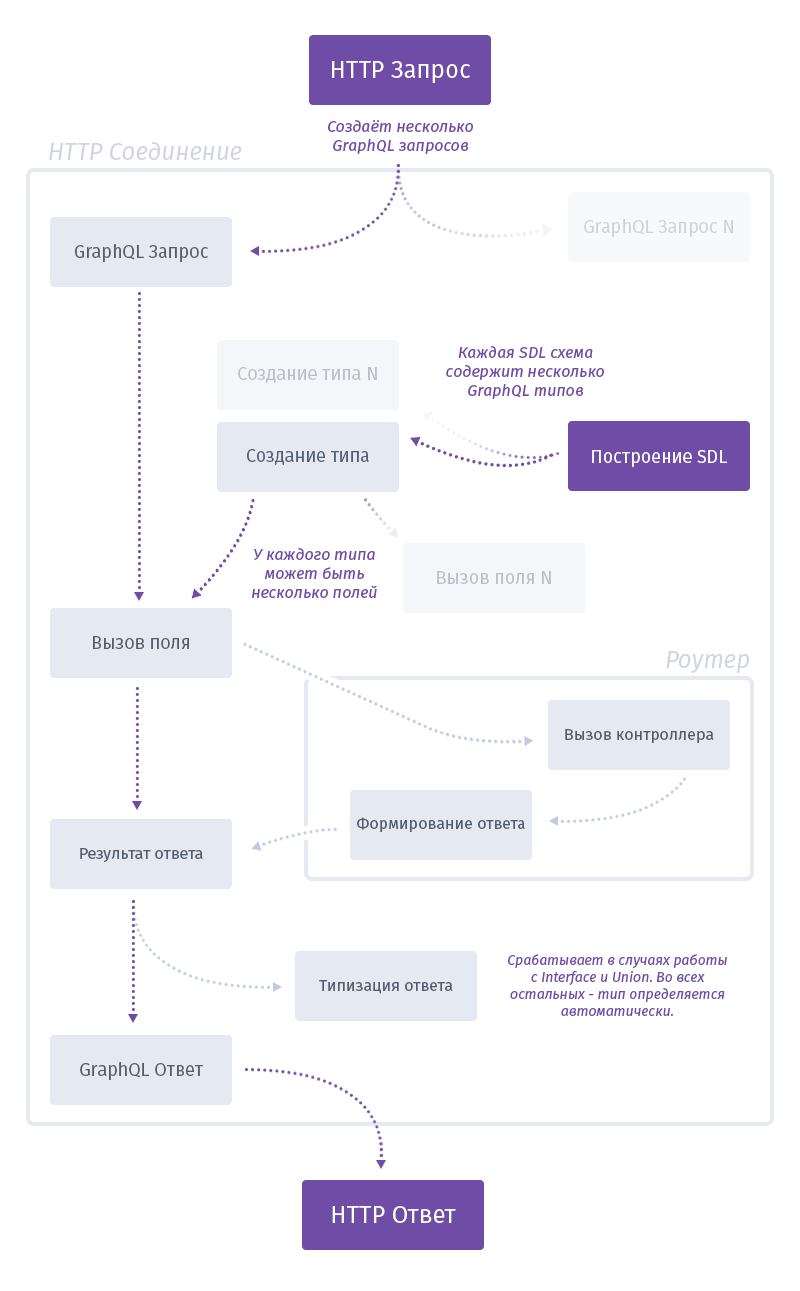
<style>
.page{position:relative;width:800px;height:1291px;background:#ffffff}
.page>*{position:absolute;margin:0}
.t1{font:24px "FiraSans-Regular";color:#ffffff}
.t2{font:16px "FiraSans-Italic";color:#6f4ca5}
.t3{font:24px "FiraSans-Italic";color:#ced4e2}
.t4{font:18px "FiraSans-Regular";color:#ced2d7}
.t5{font:18px "FiraSans-Regular";color:#505e70}
.t6{font:18px "FiraSans-Regular";color:#b9bfc6}
.t7{font:18px "FiraSans-Regular";color:#ffffff}
.t8{font:16px "FiraSans-Regular";color:#505e70}
.t9{font:14px "FiraSans-Italic";color:#6f4ca5}
</style>
<div class="page">
<p class="t1" style="left:332px;top:61px;width:138px;height:22px">HTTP Запрос</p>
<p class="t2" style="left:328px;top:120px;width:145px;height:34px;text-align:center">Создаёт несколько<br>GraphQL запросов</p>
<p class="t3" style="left:49px;top:142px;width:193px;height:18px">HTTP Соединение</p>
<p class="t4" style="left:584px;top:219px;width:149px;height:18px">GraphQL Запрос N</p>
<p class="t5" style="left:75px;top:244px;width:133px;height:18px">GraphQL Запрос</p>
<p class="t2" style="left:446px;top:346px;width:158px;height:53px;text-align:center">Каждая SDL схема содержит несколько GraphQL типов</p>
<p class="t6" style="left:238px;top:367px;width:139px;height:16px">Создание типа N</p>
<p class="t5" style="left:247px;top:449px;width:122px;height:16px">Создание типа</p>
<p class="t7" style="left:592px;top:450px;width:135px;height:17px">Построение SDL</p>
<p class="t2" style="left:252px;top:548px;width:125px;height:50px;text-align:center">У каждого типа может быть несколько полей</p>
<p class="t6" style="left:437px;top:571px;width:114px;height:13px">Вызов поля N</p>
<p class="t5" style="left:93px;top:636px;width:96px;height:13px">Вызов поля</p>
<p class="t3" style="left:666px;top:651px;width:83px;height:22px">Роутер</p>
<p class="t8" style="left:565px;top:729px;width:149px;height:14px">Вызов контроллера</p>
<p class="t8" style="left:357px;top:817px;width:168px;height:15px">Формирование ответа</p>
<p class="t8" style="left:80px;top:848px;width:123px;height:14px">Результат ответа</p>
<p class="t9" style="left:508px;top:954px;width:219px;height:62px;text-align:center">Срабатывает в случаях работы с Interface и Union. Во всех остальных - тип определяется автоматически.</p>
<p class="t8" style="left:319px;top:980px;width:134px;height:14px">Типизация ответа</p>
<p class="t5" style="left:80px;top:1062px;width:123px;height:18px">GraphQL Ответ</p>
<p class="t1" style="left:332px;top:1206px;width:124px;height:17px">HTTP Ответ</p>
</div>
